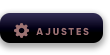
<style>
.page{position:relative;width:110px;height:55px}
.page>*{position:absolute;margin:0}
.t1{font:10px "Gilroy-ExtraBold";letter-spacing:0.19em;color:#9c7272;text-transform:uppercase}
</style>
<div class="page">
<p class="t1" style="left:36px;top:27px;width:53px;height:9px">aJUSTES</p>
</div>
